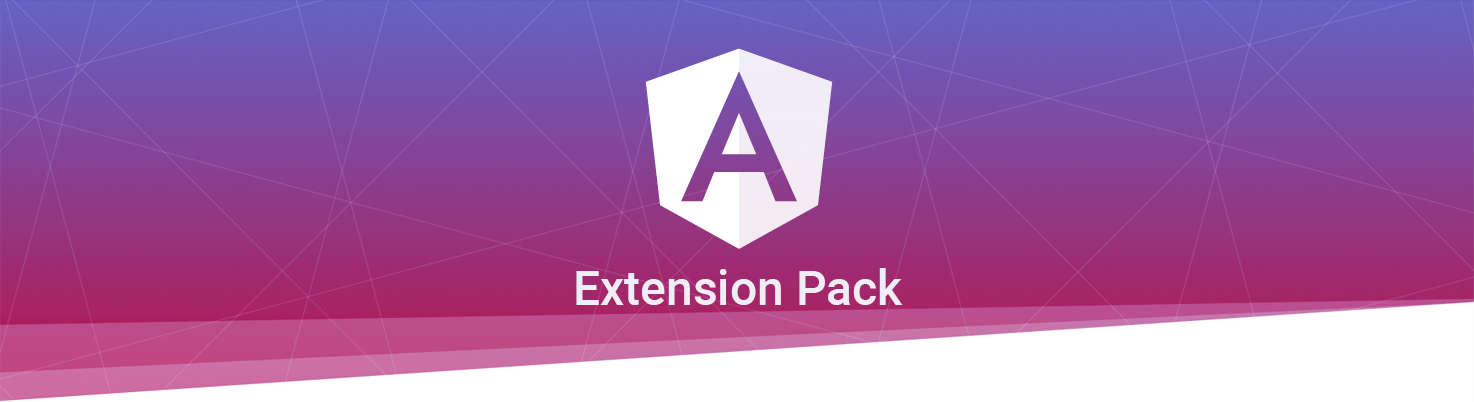
<style>
.page{position:relative;width:1474px;height:402px}
.page>*{position:absolute;margin:0}
.t1{font:48px "Roboto-Medium";color:#f1edf6}
</style>
<div class="page">
<p class="t1" style="left:576px;top:268px;width:327px;height:37px">Extension Pack</p>
</div>
